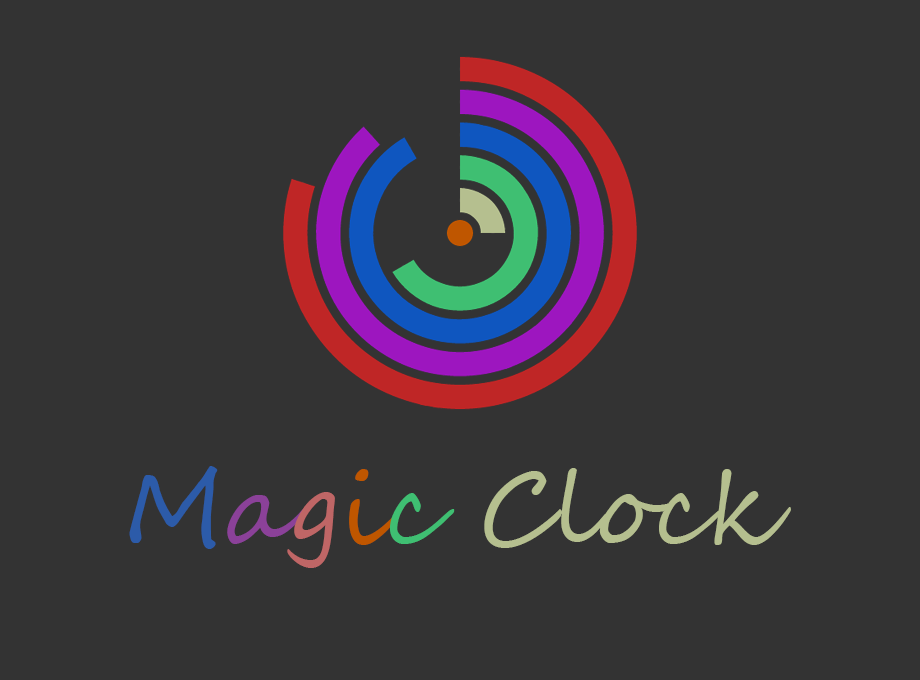
<style>
.page{position:relative;width:920px;height:680px;background:#333333}
.page>*{position:absolute;margin:0}
.t1{font:100px "SegoeScript";color:#b5bf8f}
.t2{font:100px "SegoeScript";color:#2c5ba9}
.t3{font:100px "SegoeScript";color:#8b4199}
.t4{font:100px "SegoeScript";color:#bf6666}
.t5{font:100px "SegoeScript";color:#bf5600}
.t6{font:100px "SegoeScript";color:#3fbf72}
</style>
<div class="page">
<p class="t1" style="left:129px;top:466px;width:662px;height:102px"><span class="t2">M</span><span class="t3">a</span><span class="t4">g</span><span class="t5">i</span><span class="t6">c </span>Clock</p>
</div>
